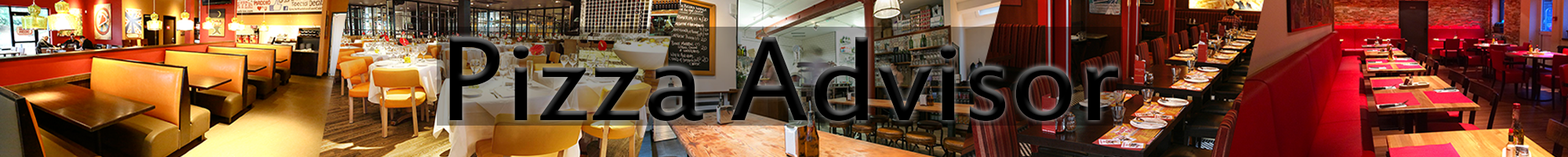
<style>
.page{position:relative;width:1568px;height:157px}
.page>*{position:absolute;margin:0}
.t1{font:130.7px "EstrangeloEdessa";color:#000000}
</style>
<div class="page">
<p class="t1" style="left:449px;top:37px;width:670px;height:84px">Pizza Advisor</p>
</div>
